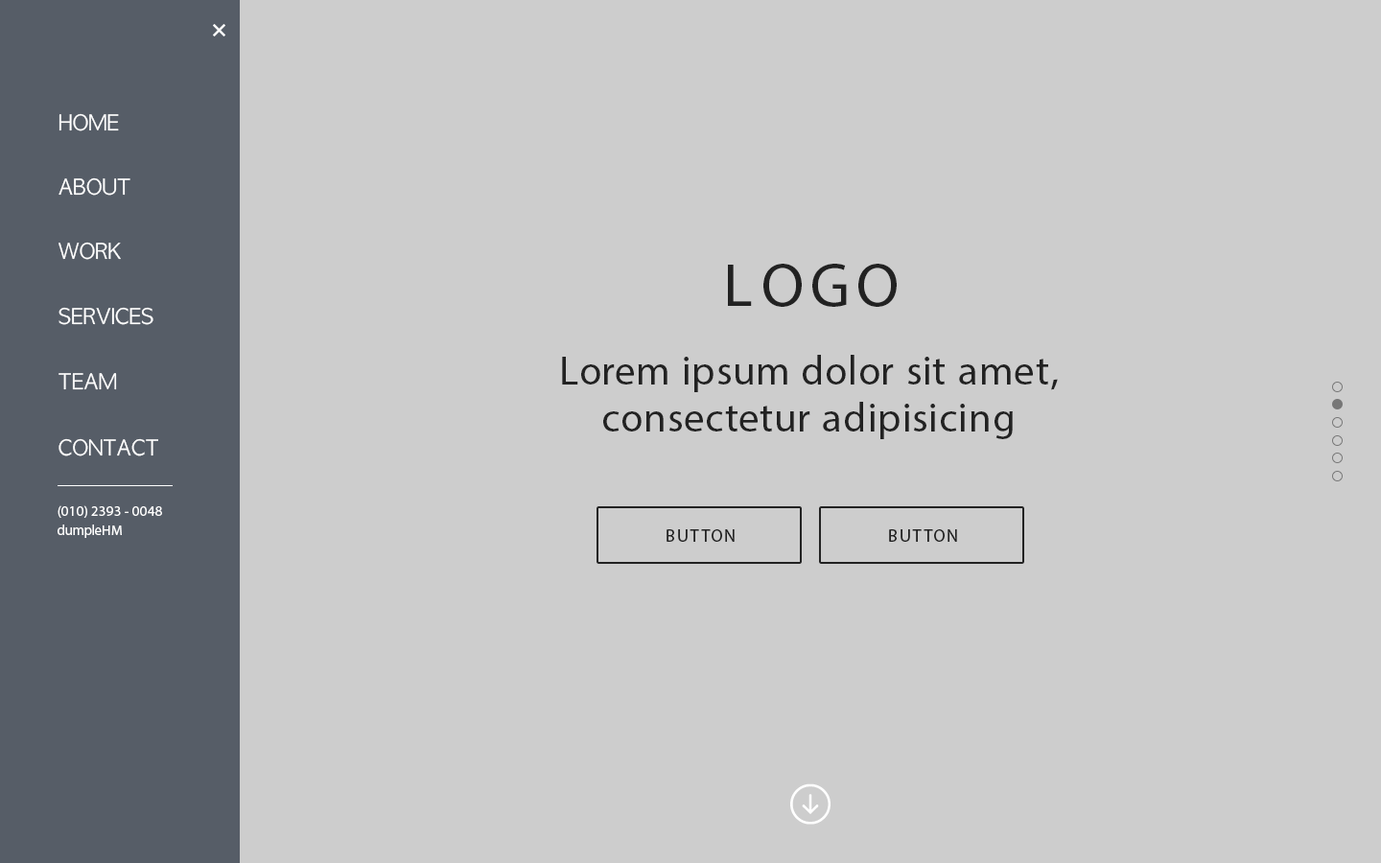
<style>
.page{position:relative;width:1381px;height:863px;background:#cdcdcd}
.page>*{position:absolute;margin:0}
.t1{font:20.5px "AppleGothic";color:#ffffff}
.t2{font:61.4px "MyriadPro-Regular";letter-spacing:0.12em;color:#222222;text-transform:uppercase}
.t3{font:40.9px/46.8px "MyriadPro-Regular";letter-spacing:0.02em;color:#222222}
.t4{font:14.1px/19.2px "MyriadPro-Regular";color:#ffffff}
.t5{font:17.3px "MyriadPro-Regular";letter-spacing:0.1em;color:#222222}
</style>
<div class="page">
<p class="t1" style="left:59px;top:113px;width:60px;height:18px">HOME</p>
<p class="t1" style="left:59px;top:177px;width:71px;height:19px">ABOUT</p>
<p class="t1" style="left:59px;top:242px;width:62px;height:18px">WORK</p>
<p class="t2" style="left:728px;top:264px;width:169px;height:43px">LOGO</p>
<p class="t1" style="left:59px;top:307px;width:94px;height:18px">SERVICES</p>
<p class="t3" style="left:562px;top:355px;width:496px;height:84px;text-align:center">Lorem ipsum dolor sit amet, <br>consectetur adipisicing</p>
<p class="t1" style="left:59px;top:373px;width:58px;height:17px">TEAM</p>
<p class="t1" style="left:59px;top:438px;width:99px;height:19px">CONTACT</p>
<p class="t4" style="left:58px;top:506px;width:104px;height:32px">(010) 2393 - 0048<br>dumpleHM</p>
<p class="t5" style="left:667px;top:529px;width:68px;height:13px">BUTTON</p>
<p class="t5" style="left:889px;top:529px;width:68px;height:13px">BUTTON</p>
</div>
